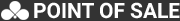
<style>
.page{position:relative;width:180px;height:21px;background:#333333}
.page>*{position:absolute;margin:0}
.t1{font:21.3px "Roboto-Bold";color:#ffffff}
</style>
<div class="page">
<p class="t1" style="left:34px;top:2px;width:146px;height:17px">POINT OF SALE</p>
</div>
